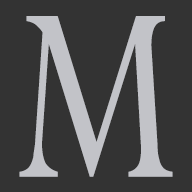
<style>
.page{position:relative;width:192px;height:192px;background:#333333}
.page>*{position:absolute;margin:0}
.t1{font:280px "Oxford";letter-spacing:0.175em;color:#c2c3c8;scale:0.76 1}
</style>
<div class="page">
<p class="t1" style="left:19px;top:16px;width:154px;height:161px">M</p>
</div>
